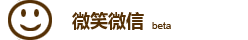
<style>
.page{position:relative;width:248px;height:40px;background:#ffffff}
.page>*{position:absolute;margin:0}
.t1{font:18px "MicrosoftYaHei-Bold";color:#553005}
.t2{font:10px "ArialMT";color:#553005}
</style>
<div class="page">
<p class="t1" style="left:72px;top:12px;width:72px;height:18px">微笑微信</p>
<p class="t2" style="left:152px;top:22px;width:19px;height:7px">beta</p>
</div>
